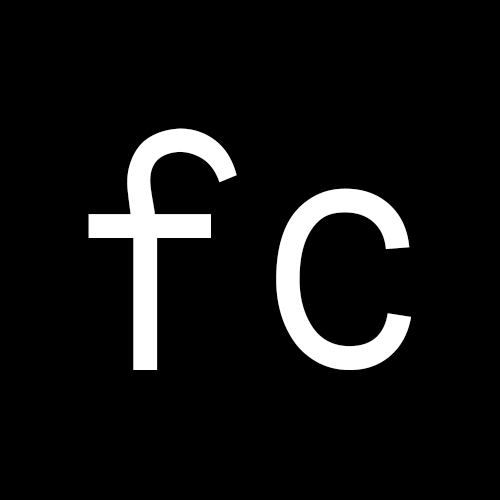
<style>
.page{position:relative;width:500px;height:500px;background:#000000}
.page>*{position:absolute;margin:0}
.t1{font:372px "Whois-mono";color:#ffffff}
</style>
<div class="page">
<p class="t1" style="left:88px;top:128px;width:324px;height:242px">fc</p>
</div>
